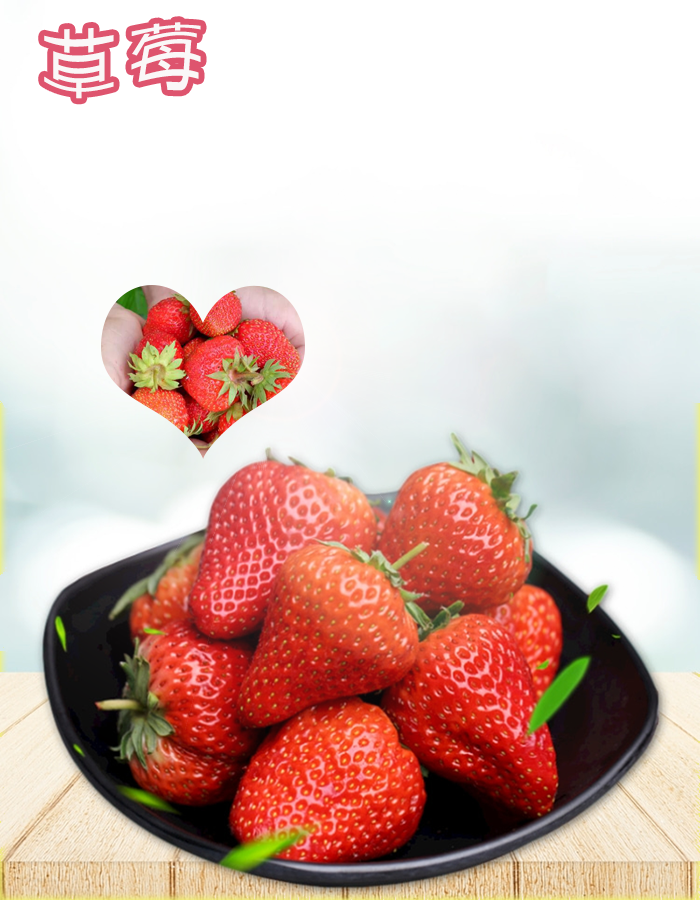
<style>
.page{position:relative;width:700px;height:900px}
.page>*{position:absolute;margin:0}
.t1{font:72px "MicrosoftYaHei";letter-spacing:0.2em;color:#faf7f8}
</style>
<div class="page">
<p class="t1" style="left:44px;top:22px;width:157px;height:77px">草莓</p>
</div>
